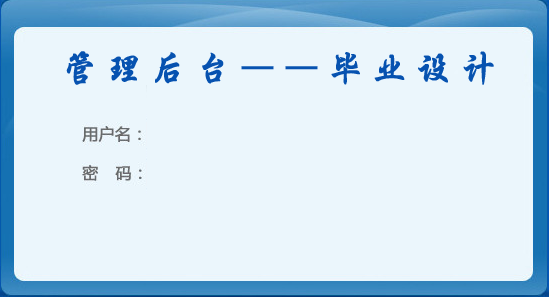
<style>
.page{position:relative;width:549px;height:297px;background:#ebf6fc}
.page>*{position:absolute;margin:0}
.t1{font:36px "SingKaiEG-Bold-GB";letter-spacing:0.2em;color:#0652b0;font-weight:bold}
</style>
<div class="page">
<p class="t1" style="left:66px;top:51px;width:428px;height:34px">管理后台——毕业设计</p>
</div>
